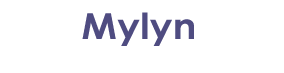
<style>
.page{position:relative;width:284px;height:73px;background:#ffffff}
.page>*{position:absolute;margin:0}
.t1{font:36px "CenturyGothic-Bold";color:#4f4c81;scale:1.1 1}
</style>
<div class="page">
<p class="t1" style="left:82px;top:12px;width:112px;height:34px">Mylyn</p>
</div>
